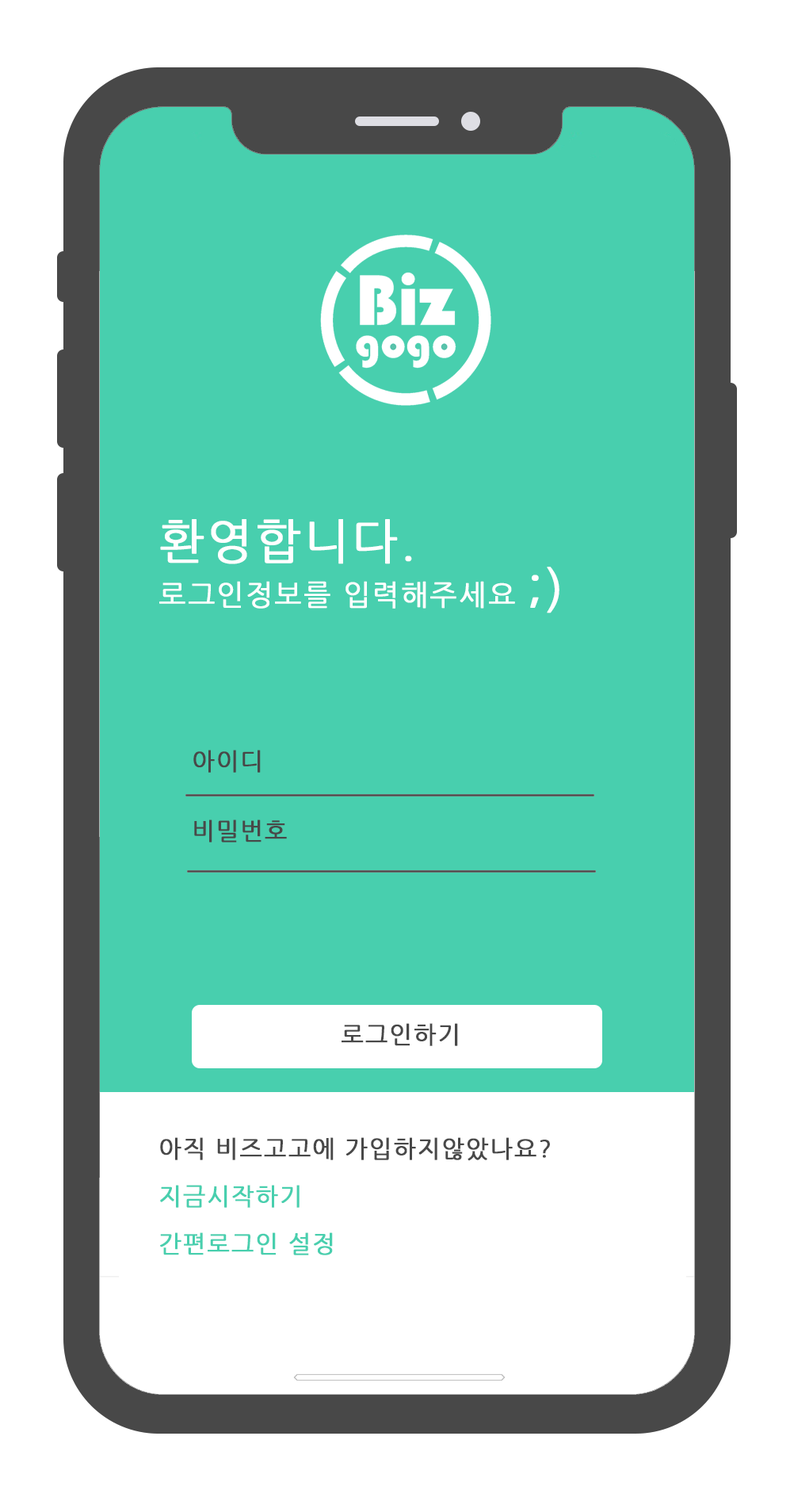
<style>
.page{position:relative;width:794px;height:1501px;background:#48cfae}
.page>*{position:absolute;margin:0}
.t1{font:28.5px/47.6px "NanumGothic";letter-spacing:0.05em;color:#ffffff;font-weight:bold}
.t2{font:47.6px/47.6px "NanumGothic";letter-spacing:0.05em;color:#ffffff;font-weight:bold}
.t3{font:23.8px "NanumGothic";letter-spacing:0.05em;color:#484848;font-weight:bold}
.t4{font:23.8px/47.6px "NanumGothic";letter-spacing:0.05em;color:#484848;font-weight:bold}
.t5{font:23.8px/47.6px "NanumGothic";letter-spacing:0.05em;color:#48cfae;font-weight:bold}
</style>
<div class="page">
<p class="t1" style="left:159px;top:519px;width:401px;height:95px"><span class="t2">환영합니다.<br></span>로그인정보를 입력해주세요 <span class="t2">;)</span></p>
<p class="t3" style="left:193px;top:750px;width:68px;height:23px">아이디</p>
<p class="t3" style="left:194px;top:820px;width:93px;height:23px">비밀번호</p>
<p class="t3" style="left:342px;top:1023px;width:116px;height:23px">로그인하기</p>
<p class="t4" style="left:160px;top:1137px;width:390px;height:119px">아직 비즈고고에 가입하지않았나요?<br><span class="t5">지금시작하기<br>간편로그인 설정</span></p>
</div>
